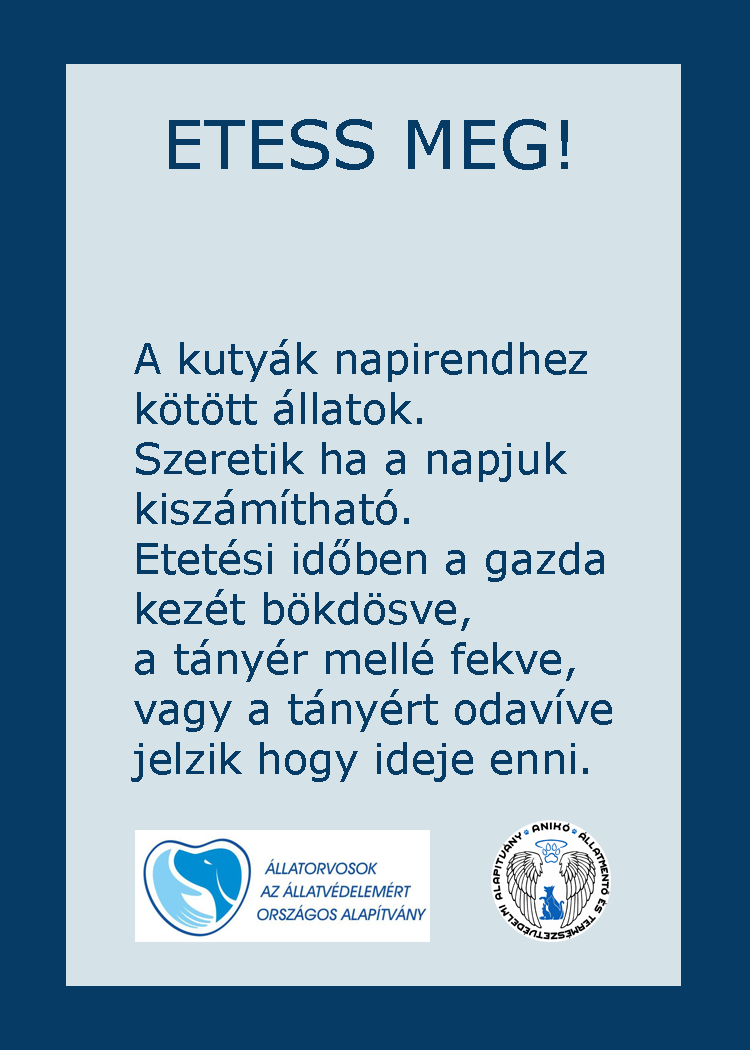
<style>
.page{position:relative;width:750px;height:1050px;background:#d5e2e7}
.page>*{position:absolute;margin:0}
.t1{font:66.7px "Verdana";color:#053b65}
.t2{font:66.7px "GravitateBRK";color:#053b65}
.t3{font:41.7px "Verdana";color:#053b65}
</style>
<div class="page">
<p class="t1" style="left:169px;top:119px;width:399px;height:51px"><span class="t2">         </span>ETESS MEG!</p>
<p class="t3" style="left:131px;top:339px;width:481px;height:443px">A kutyák napirendhez<br>kötött állatok.<br>Szeretik ha a napjuk <br>kiszámítható.<br>Etetési időben a gazda<br>kezét bökdösve,<br>a tányér mellé fekve,<br>vagy a tányért odavíve<br>jelzik hogy ideje enni.</p>
</div>
